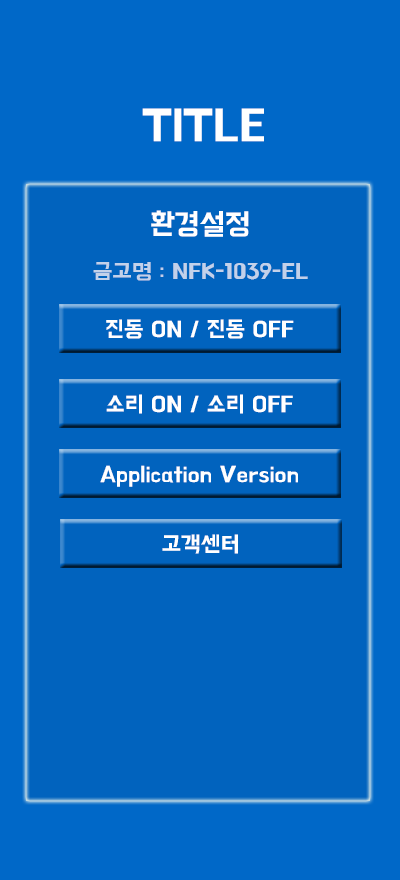
<style>
.page{position:relative;width:400px;height:880px;background:#0163be}
.page>*{position:absolute;margin:0}
.t1{font:45px "BMHANNAPro";color:#ffffff}
.t2{font:30px "BMHANNAPro";color:#ffffff}
.t3{font:22.1px "BMHANNA11yrsold";color:#c2d1ea;scale:1.04 1}
.t4{font:22.6px "BMHANNAPro";color:#ffffff}
</style>
<div class="page">
<p class="t1" style="left:142px;top:108px;width:122px;height:34px">TITLE</p>
<p class="t2" style="left:151px;top:210px;width:98px;height:27px">환경설정</p>
<p class="t3" style="left:93px;top:262px;width:215px;height:19px">금고명 : NFK-1039-EL</p>
<p class="t4" style="left:106px;top:319px;width:188px;height:20px">진동 ON / 진동 OFF</p>
<p class="t4" style="left:106px;top:394px;width:187px;height:20px">소리 ON / 소리 OFF</p>
<p class="t4" style="left:100px;top:465px;width:198px;height:22px">Application Version</p>
<p class="t4" style="left:162px;top:534px;width:76px;height:20px">고객센터</p>
</div>
